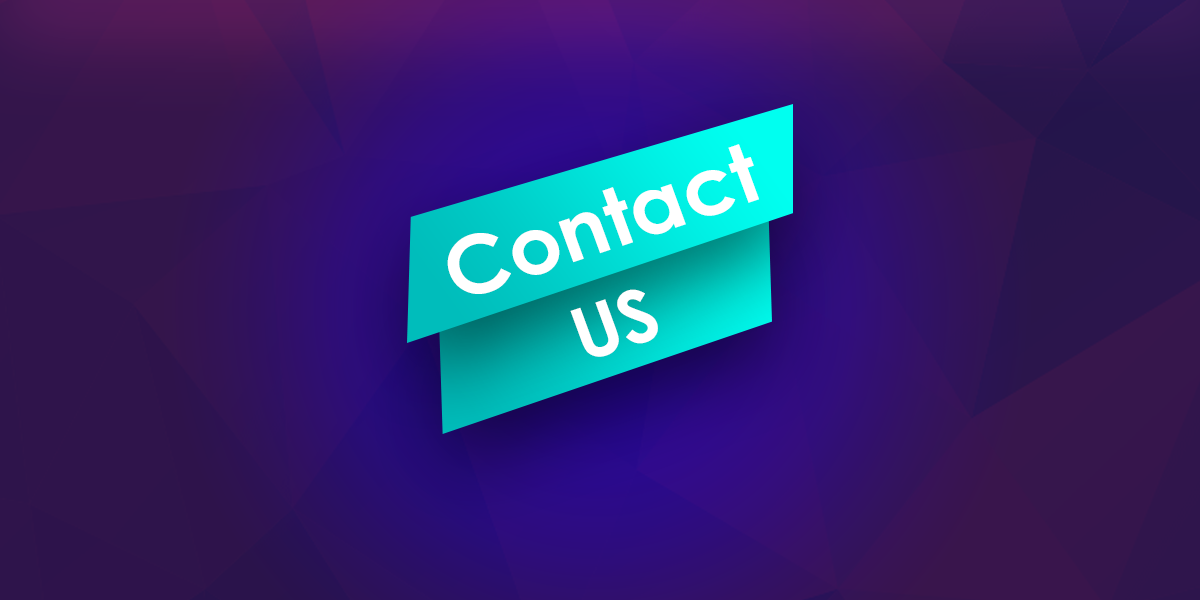
<style>
.page{position:relative;width:1200px;height:600px}
.page>*{position:absolute;margin:0}
.t1{font:80.7px "CenturyGothic-Bold";color:#ffffff;scale:1.03 1}
.t2{font:72.9px "CenturyGothic-Bold";color:#ffffff;scale:1.03 1}
</style>
<div class="page">
<p class="t1" style="left:447px;top:144px;width:312px;height:150px;rotate:-19deg">Contact</p>
<p class="t2" style="left:570px;top:289px;width:88px;height:68px;rotate:-19deg">US</p>
</div>
